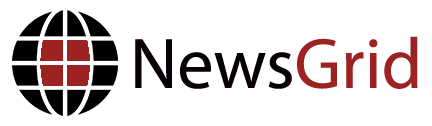
<style>
.page{position:relative;width:432px;height:126px;background:#ffffff}
.page>*{position:absolute;margin:0}
.t1{font:72px "MyriadPro-Regular";color:#070007}
.t2{font:72px "MyriadPro-Regular";color:#9d2323}
</style>
<div class="page">
<p class="t1" style="left:135px;top:36px;width:283px;height:53px">News<span class="t2">Grid</span></p>
</div>
